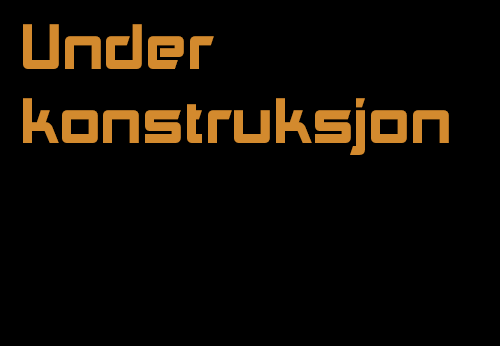
<style>
.page{position:relative;width:500px;height:346px;background:#000000}
.page>*{position:absolute;margin:0}
.t1{font:61px "Akashi";color:#d38a2e}
</style>
<div class="page">
<p class="t1" style="left:23px;top:24px;width:426px;height:131px">Under <br>konstruksjon</p>
</div>
